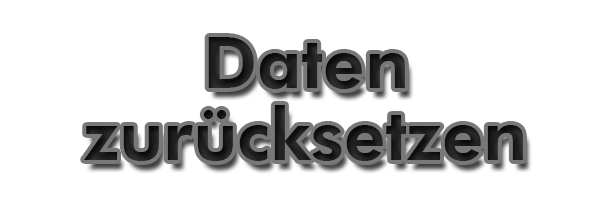
<style>
.page{position:relative;width:600px;height:200px;background:#ffffff}
.page>*{position:absolute;margin:0}
.t1{font:72px/36px "FuturaBT-Heavy";color:#1c1c1c}
</style>
<div class="page">
<p class="t1" style="left:84px;top:37px;width:439px;height:124px;text-align:center">Daten<br><br>zurücksetzen</p>
</div>
